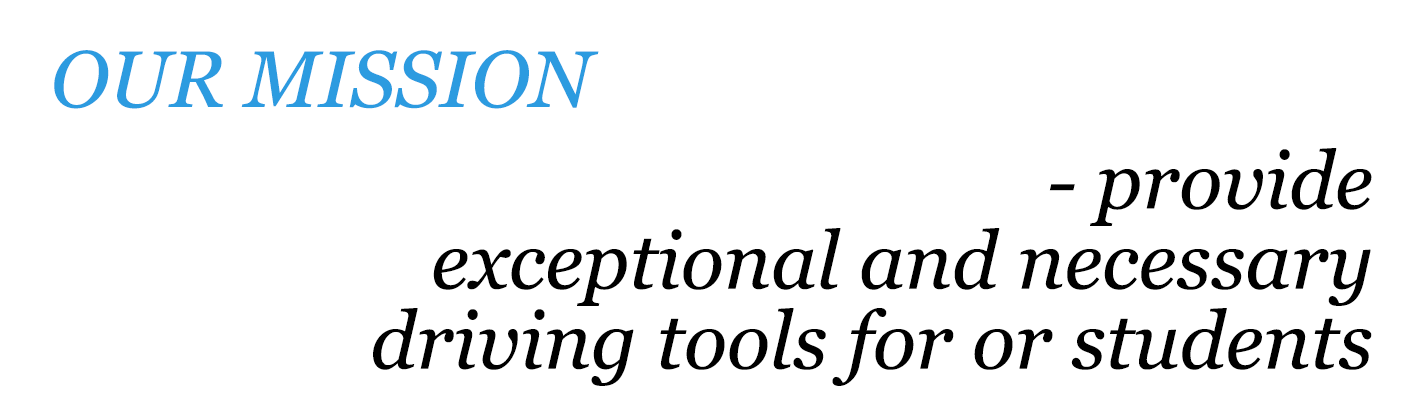
<style>
.page{position:relative;width:1412px;height:420px;background:#ffffff}
.page>*{position:absolute;margin:0}
.t1{font:80px "Georgia-Italic";color:#2c9be0}
.t2{font:80px/80px "Georgia-Italic";color:#000000}
</style>
<div class="page">
<p class="t1" style="left:54px;top:50px;width:545px;height:59px">OUR MISSION</p>
<p class="t2" style="left:373px;top:148px;width:999px;height:238px;text-align:right">- provide<br>exceptional and necessary<br>driving tools for or students</p>
</div>
